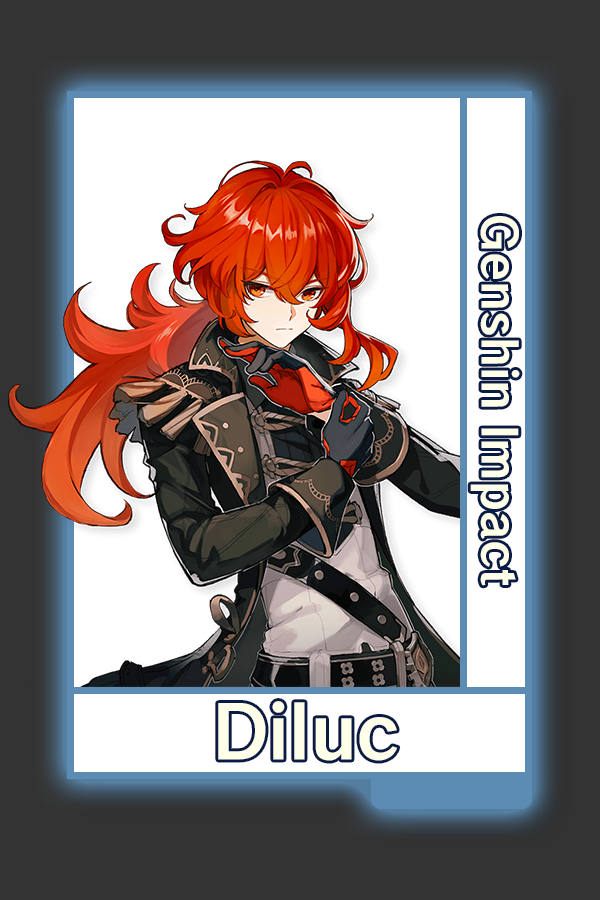
<style>
.page{position:relative;width:600px;height:900px;background:#ffffff}
.page>*{position:absolute;margin:0}
.t1{font:48.8px "HYWenHei-HEW";color:#fefef4}
.t2{font:75px "HYWenHei-HEW";color:#fefef4}
</style>
<div class="page">
<p class="t1" style="left:470px;top:216px;width:50px;height:370px;rotate:90deg">Genshin Impact</p>
<p class="t2" style="left:218px;top:701px;width:180px;height:60px">Diluc</p>
</div>
